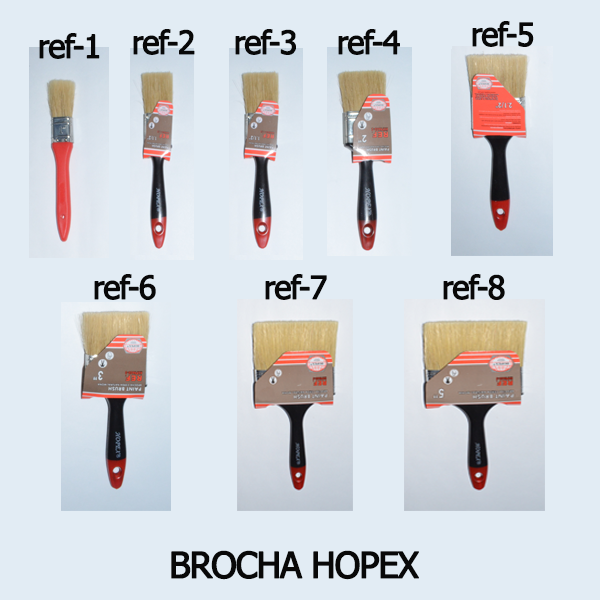
<style>
.page{position:relative;width:600px;height:600px;background:#e2ecf4}
.page>*{position:absolute;margin:0}
.t1{font:32px "Tahoma";letter-spacing:-0.05em;color:#080808;font-weight:bold}
.t2{font:36px "Tahoma";letter-spacing:-0.05em;color:#080808;font-weight:bold}
</style>
<div class="page">
<p class="t1" style="left:133px;top:29px;width:62px;height:26px">ref-2</p>
<p class="t1" style="left:235px;top:29px;width:61px;height:26px">ref-3</p>
<p class="t1" style="left:338px;top:29px;width:62px;height:26px">ref-4</p>
<p class="t1" style="left:472px;top:21px;width:62px;height:26px">ref-5</p>
<p class="t1" style="left:39px;top:33px;width:61px;height:26px">ref-1</p>
<p class="t1" style="left:94px;top:274px;width:62px;height:26px">ref-6</p>
<p class="t1" style="left:265px;top:274px;width:62px;height:26px">ref-7</p>
<p class="t1" style="left:443px;top:274px;width:62px;height:26px">ref-8</p>
<p class="t2" style="left:171px;top:550px;width:248px;height:30px">BROCHA HOPEX</p>
</div>
